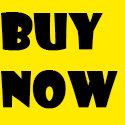
<style>
.page{position:relative;width:125px;height:125px;background:#ffea00}
.page>*{position:absolute;margin:0}
.t1{font:48px "ShowcardGothic-Reg";color:#000000;font-weight:bold}
</style>
<div class="page">
<p class="t1" style="left:1px;top:12px;width:117px;height:97px">BUY<br>NOW</p>
</div>
